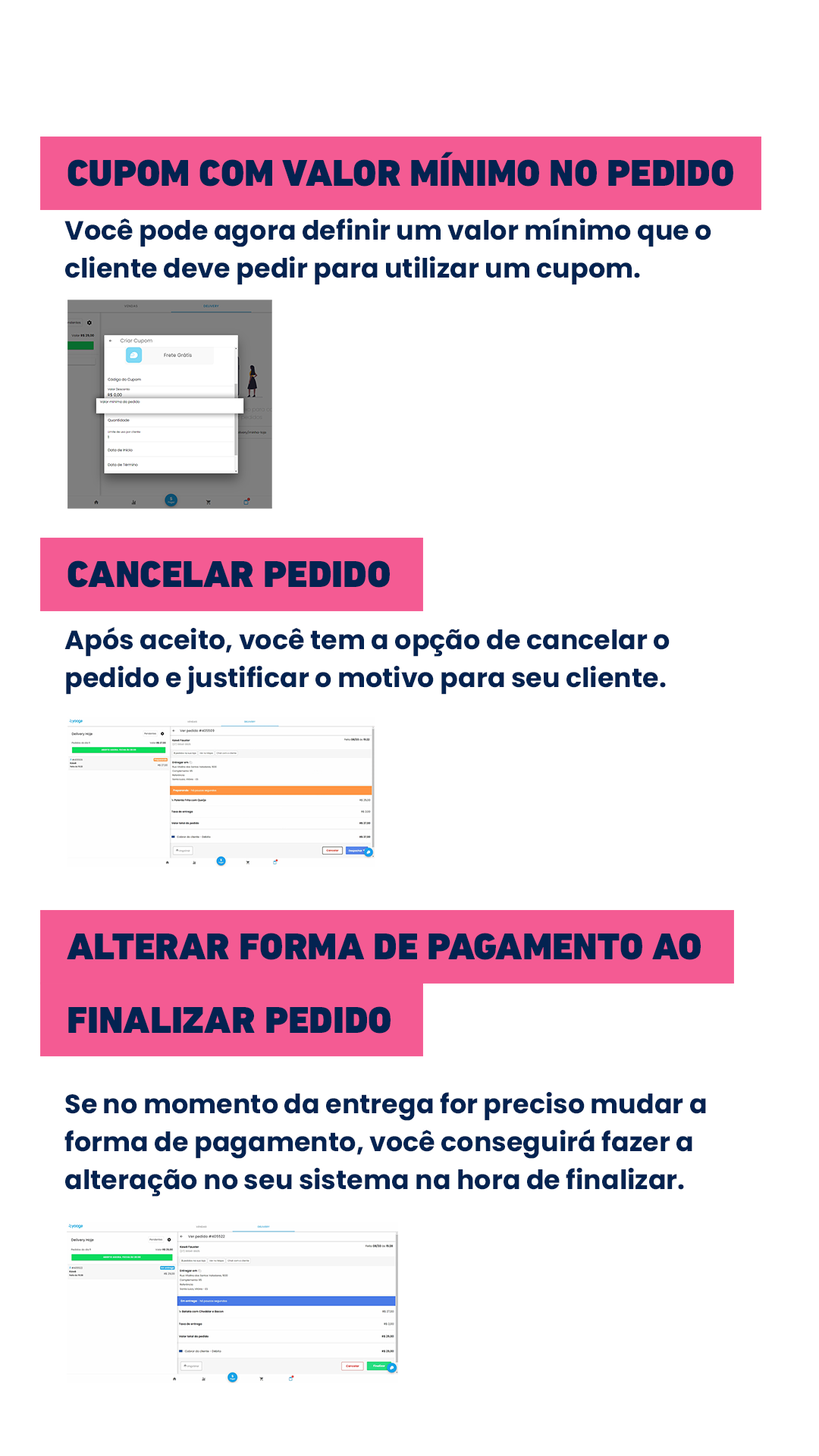
<style>
.page{position:relative;width:819px;height:1456px;background:#ffffff}
.page>*{position:absolute;margin:0}
.t1{font:37.9px "DINNextLTPro-Black";color:#032351;text-transform:uppercase}
.t2{font:26.5px/37.9px "Poppins-Bold";color:#032351}
.t3{font:37.9px/73.6px "DINNextLTPro-Black";color:#032351;text-transform:uppercase}
</style>
<div class="page">
<p class="t1" style="left:67px;top:152px;width:666px;height:35px">Cupom com valor mínimo no pedido</p>
<p class="t2" style="left:64px;top:218px;width:647px;height:67px">Você pode agora definir um valor mínimo que o cliente deve pedir para utilizar um cupom.</p>
<p class="t1" style="left:67px;top:560px;width:323px;height:28px">Cancelar pedido</p>
<p class="t2" style="left:64px;top:626px;width:606px;height:69px">Após aceito, você tem a opção de cancelar o pedido e justificar o motivo para seu cliente.</p>
<p class="t3" style="left:67px;top:933px;width:634px;height:101px">Alterar forma de pagamento ao<br>finalizar pedido</p>
<p class="t2" style="left:64px;top:1092px;width:642px;height:105px">Se no momento da entrega for preciso mudar a forma de pagamento, você conseguirá fazer a alteração no seu sistema na hora de finalizar.</p>
</div>
